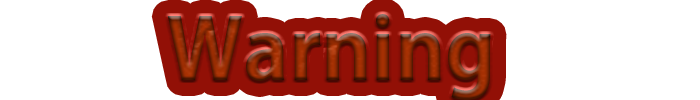
<style>
.page{position:relative;width:700px;height:100px;background:#ffffff}
.page>*{position:absolute;margin:0}
.t1{font:83.3px "KozGoPr6N-Bold";color:#a83203}
</style>
<div class="page">
<p class="t1" style="left:167px;top:14px;width:324px;height:86px">Warning</p>
</div>
